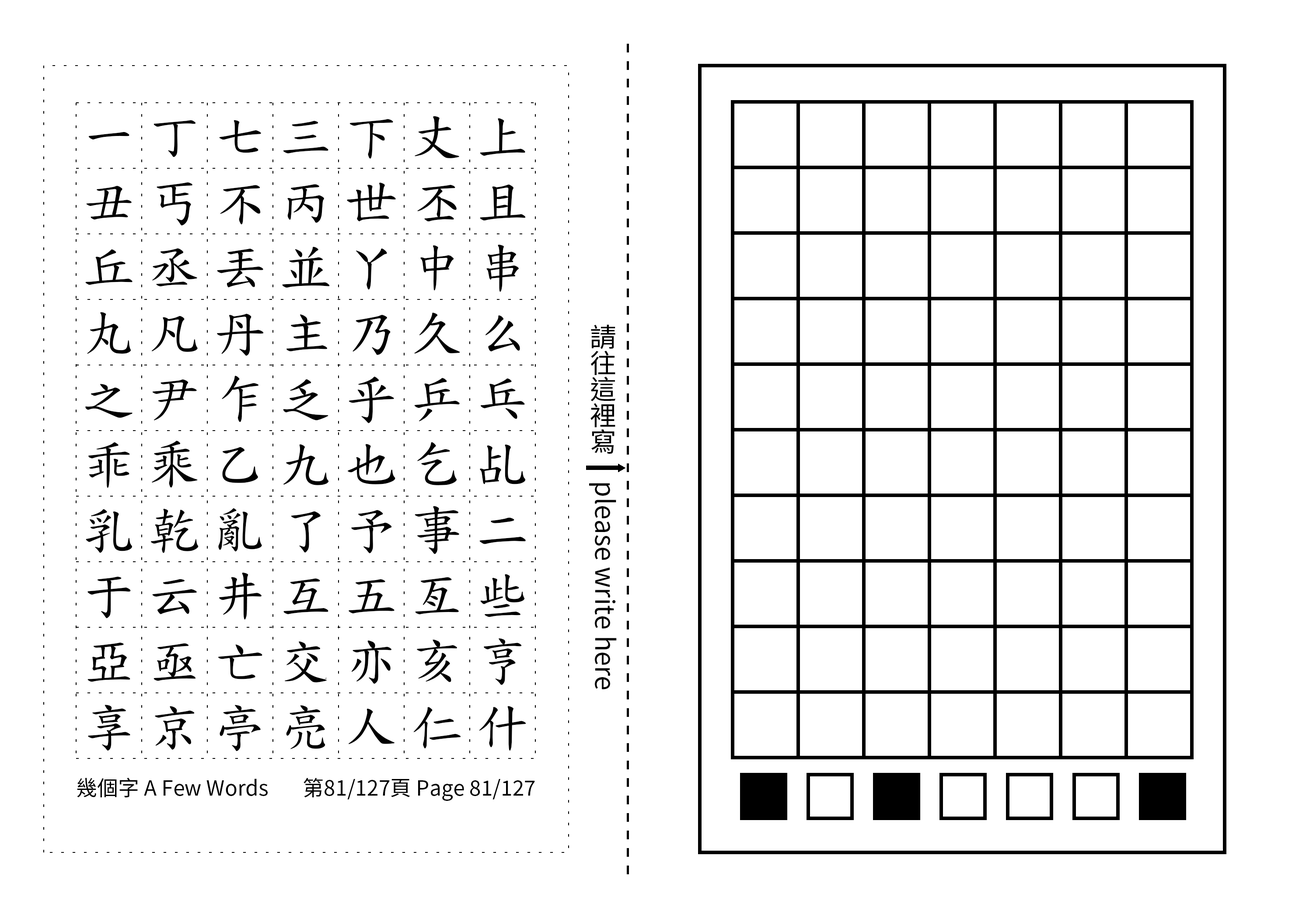
<style>
.page{position:relative;width:1299px;height:918px;background:#ffffff}
.page>*{position:absolute;margin:0}
.t1{font:52.5px/65.6px "TW-Kai-98_1";letter-spacing:0.25em;color:#000000}
.t2{font:26.2px "SourceHanSansTC-Regular";color:#000000}
.t3{font:21px "SourceHanSansTC-Regular";color:#000000}
</style>
<div class="page">
<p class="t1" style="left:85px;top:116px;width:441px;height:636px;text-align:center">一丁七三下丈上丑丐不丙世丕且丘丞丟並丫中串丸凡丹主乃久么之尹乍乏乎乒乓乖乘乙九也乞乩乳乾亂了予事二于云井互五亙些亞亟亡交亦亥亨享京亭亮人仁什</p>
<p class="t2" style="left:589px;top:324px;width:28px;height:366px;text-align:center">請往這裡寫　please write here</p>
<p class="t3" style="left:77px;top:778px;width:191px;height:20px">幾個字 A Few Words</p>
<p class="t3" style="left:303px;top:778px;width:232px;height:23px">第81/127頁 Page 81/127</p>
</div>
